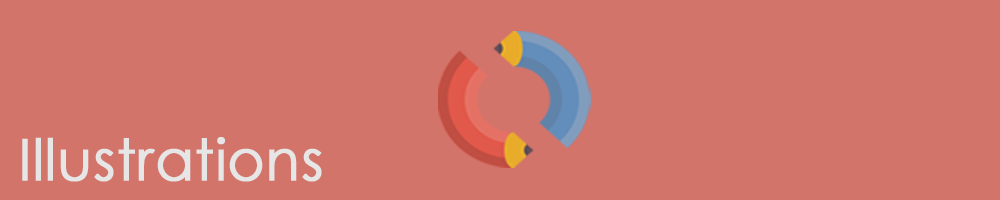
<style>
.page{position:relative;width:1000px;height:200px;background:#d3746a}
.page>*{position:absolute;margin:0}
.t1{font:57.4px "CenturyGothic";color:#e6e6e6;font-weight:bold}
</style>
<div class="page">
<p class="t1" style="left:22px;top:137px;width:300px;height:45px">Illustrations</p>
</div>
